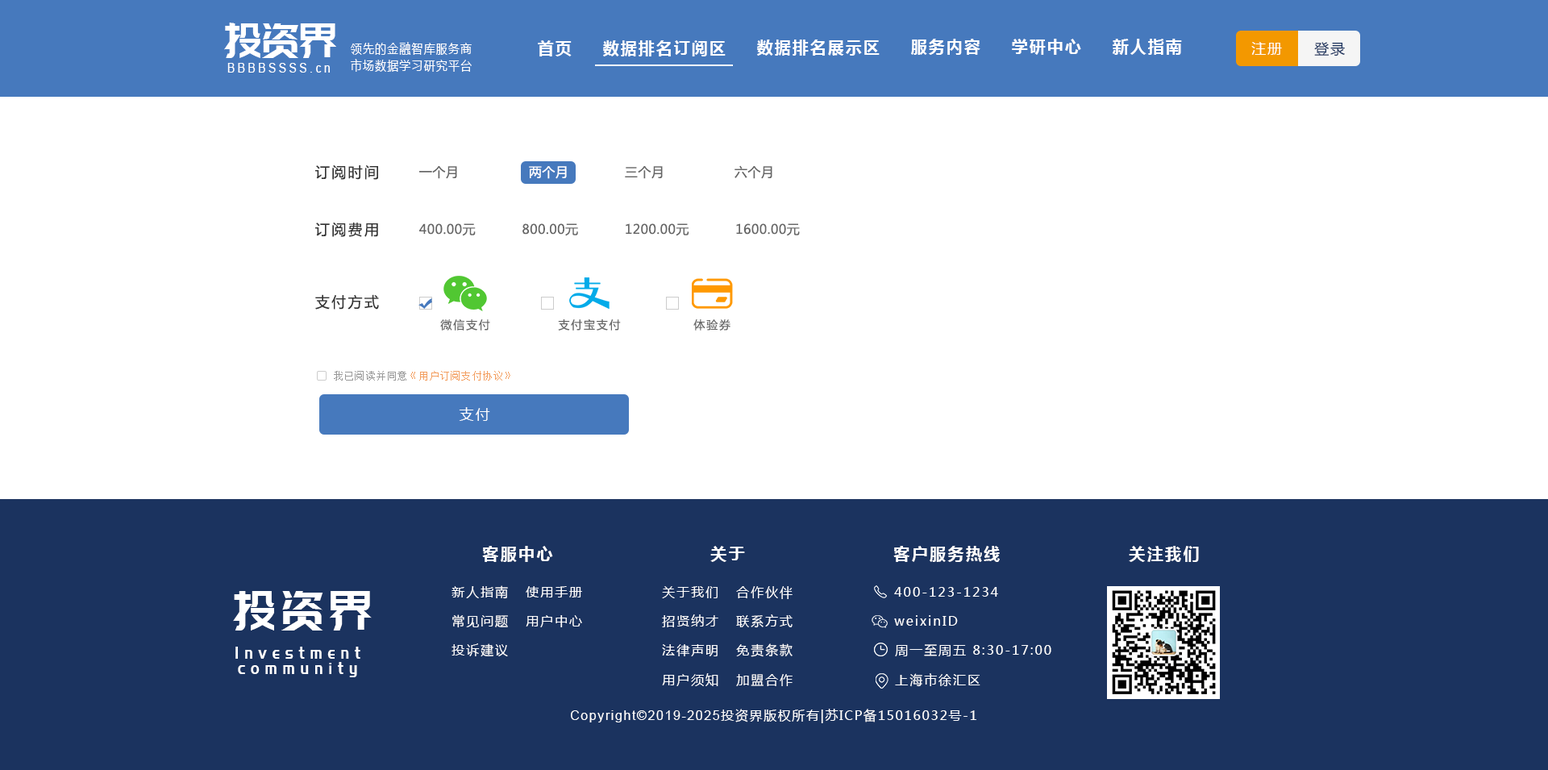
<style>
.page{position:relative;width:1548px;height:770px;background:#ffffff}
.page>*{position:absolute;margin:0}
.t1{font:48px "PangMenZhengDao";color:#ffffff;scale:0.86 1}
.t2{font:12.9px "MicrosoftYaHei";letter-spacing:0.1em;color:#ffffff;scale:0.86 1}
.t3{font:16.1px "MicrosoftYaHei-Bold";letter-spacing:0.1em;color:#ffffff}
.t4{font:14.5px "MicrosoftYaHei";letter-spacing:0.1em;color:#ffffff}
.t5{font:14.5px "MicrosoftYaHei";letter-spacing:0.1em;color:#1b335f}
.t6{font:12.9px "ArialMT";letter-spacing:0.26em;color:#ffffff;scale:0.86 1}
.t7{font:14.5px "MicrosoftYaHei";letter-spacing:0.13em;color:#333333}
.t8{font:12.9px "MicrosoftYaHei";letter-spacing:0.03em;color:#666666}
.t9{font:12.9px "MicrosoftYaHei";letter-spacing:0.03em;color:#ffffff}
.t10{font:11.3px "MicrosoftYaHei";letter-spacing:0.13em;color:#666666}
.t11{font:9.7px "SimSun";letter-spacing:0.1em;color:#f39e5f}
.t12{font:9.7px "SimSun";letter-spacing:0.1em;color:#999999}
.t13{font:14.5px "MicrosoftYaHei";letter-spacing:0.12em;color:#ffffff}
.t14{font:16.1px "MicrosoftYaHei-Bold";letter-spacing:0.12em;color:#ffffff}
.t15{font:54.8px "PangMenZhengDao";letter-spacing:0.1em;color:#ffffff;scale:0.86 1}
.t16{font:12.9px "MicrosoftYaHei";letter-spacing:0.12em;color:#ffffff}
.t17{font:17.4px/15.2px "PangMenZhengDao";letter-spacing:0.36em;color:#ffffff;scale:0.86 1}
.t18{font:12.9px "MicrosoftYaHei";letter-spacing:0.1em;color:#ffffff}
.t19{font:12.9px "ArialMT";letter-spacing:0.1em;color:#ffffff}
</style>
<div class="page">
<p class="t1" style="left:224px;top:23px;width:112px;height:35px">投资界</p>
<p class="t2" style="left:351px;top:42px;width:121px;height:13px">领先的金融智库服务商</p>
<p class="t3" style="left:538px;top:40px;width:34px;height:16px">首页</p>
<p class="t3" style="left:603px;top:40px;width:123px;height:16px">数据排名订阅区</p>
<p class="t3" style="left:757px;top:40px;width:123px;height:16px">数据排名展示区</p>
<p class="t3" style="left:911px;top:39px;width:70px;height:16px">服务内容</p>
<p class="t3" style="left:1012px;top:39px;width:69px;height:16px">学研中心</p>
<p class="t3" style="left:1112px;top:39px;width:70px;height:16px">新人指南</p>
<p class="t4" style="left:1252px;top:42px;width:30px;height:13px">注册</p>
<p class="t5" style="left:1314px;top:42px;width:31px;height:14px">登录</p>
<p class="t6" style="left:227px;top:63px;width:103px;height:10px">BBBBSSSS.cn</p>
<p class="t2" style="left:351px;top:59px;width:121px;height:13px">市场数据学习研究平台</p>
<p class="t7" style="left:315px;top:165px;width:63px;height:15px">订阅时间</p>
<p class="t8" style="left:419px;top:166px;width:38px;height:13px">一个月</p>
<p class="t9" style="left:529px;top:166px;width:38px;height:13px">两个月</p>
<p class="t8" style="left:625px;top:166px;width:38px;height:13px">三个月</p>
<p class="t8" style="left:735px;top:165px;width:38px;height:14px">六个月</p>
<p class="t7" style="left:315px;top:223px;width:63px;height:14px">订阅费用</p>
<p class="t8" style="left:419px;top:223px;width:381px;height:13px">400.00元           800.00元           1200.00元           1600.00元</p>
<p class="t7" style="left:315px;top:294px;width:64px;height:16px">支付方式</p>
<p class="t10" style="left:440px;top:319px;width:50px;height:12px">微信支付</p>
<p class="t10" style="left:558px;top:319px;width:63px;height:12px">支付宝支付</p>
<p class="t10" style="left:694px;top:319px;width:37px;height:12px">体验券</p>
<p class="t11" style="left:334px;top:371px;width:176px;height:10px"><span class="t12">我已阅读并同意</span>《用户订阅支付协议》</p>
<p class="t13" style="left:459px;top:407px;width:31px;height:14px">支付</p>
<p class="t14" style="left:482px;top:546px;width:71px;height:16px">客服中心</p>
<p class="t14" style="left:710px;top:546px;width:35px;height:16px">关于</p>
<p class="t14" style="left:894px;top:546px;width:106px;height:16px">客户服务热线</p>
<p class="t14" style="left:1129px;top:546px;width:70px;height:16px">关注我们</p>
<p class="t15" style="left:233px;top:591px;width:139px;height:40px">投资界</p>
<p class="t16" style="left:452px;top:585px;width:56px;height:14px">新人指南</p>
<p class="t16" style="left:526px;top:586px;width:56px;height:12px">使用手册</p>
<p class="t16" style="left:662px;top:586px;width:56px;height:12px">关于我们</p>
<p class="t16" style="left:736px;top:586px;width:57px;height:13px">合作伙伴</p>
<p class="t16" style="left:894px;top:587px;width:104px;height:10px">400-123-1234</p>
<p class="t16" style="left:452px;top:614px;width:56px;height:14px">常见问题</p>
<p class="t16" style="left:526px;top:615px;width:56px;height:12px">用户中心</p>
<p class="t16" style="left:662px;top:614px;width:57px;height:13px">招贤纳才</p>
<p class="t16" style="left:736px;top:614px;width:57px;height:14px">联系方式</p>
<p class="t16" style="left:894px;top:615px;width:64px;height:11px">weixinID</p>
<p class="t17" style="left:235px;top:647px;width:125px;height:30px;text-align:center">Investment<br>community</p>
<p class="t16" style="left:452px;top:644px;width:56px;height:13px">投诉建议</p>
<p class="t16" style="left:662px;top:644px;width:56px;height:12px">法律声明</p>
<p class="t16" style="left:736px;top:644px;width:57px;height:13px">免责条款</p>
<p class="t16" style="left:895px;top:644px;width:157px;height:12px">周一至周五 8:30-17:00</p>
<p class="t16" style="left:662px;top:673px;width:57px;height:13px">用户须知</p>
<p class="t16" style="left:736px;top:674px;width:57px;height:12px">加盟合作</p>
<p class="t16" style="left:895px;top:673px;width:86px;height:14px">上海市徐汇区</p>
<p class="t18" style="left:571px;top:709px;width:406px;height:14px"><span class="t19">Copyright©2019-2025</span>投资界版权所有|苏ICP备15016032号-1</p>
</div>
